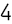
<style>
.page{position:relative;width:12px;height:24px;background:#ffffff}
.page>*{position:absolute;margin:0}
.t1{font:24px "Clock2017Rv0.4170118";color:#000000}
</style>
<div class="page">
<p class="t1" style="left:0px;top:3px;width:11px;height:18px">4</p>
</div>
